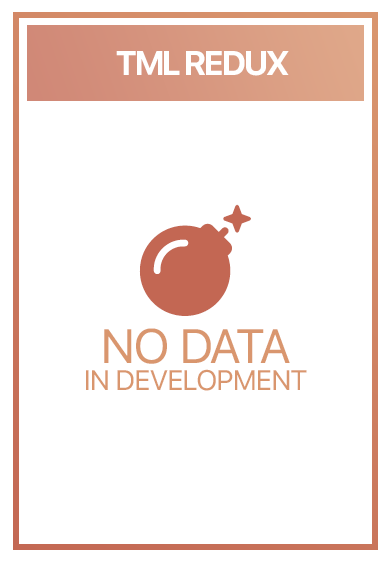
<style>
.page{position:relative;width:391px;height:562px;background:#ffffff}
.page>*{position:absolute;margin:0}
.t1{font:34px "SFProDisplay-Bold";letter-spacing:-0.05em;color:#ffffff;text-transform:uppercase}
.t2{font:28px/27px "SFUIText-Regular";letter-spacing:-0.05em;color:#da976f;text-transform:uppercase}
.t3{font:48px/29px "SFUIText-Regular";letter-spacing:-0.05em;color:#da976f;text-transform:uppercase}
</style>
<div class="page">
<p class="t1" style="left:116px;top:51px;width:173px;height:25px">tml redux</p>
<p class="t2" style="left:86px;top:328px;width:221px;height:63px;text-align:center"><span class="t3">no data<br></span>in Development</p>
</div>
